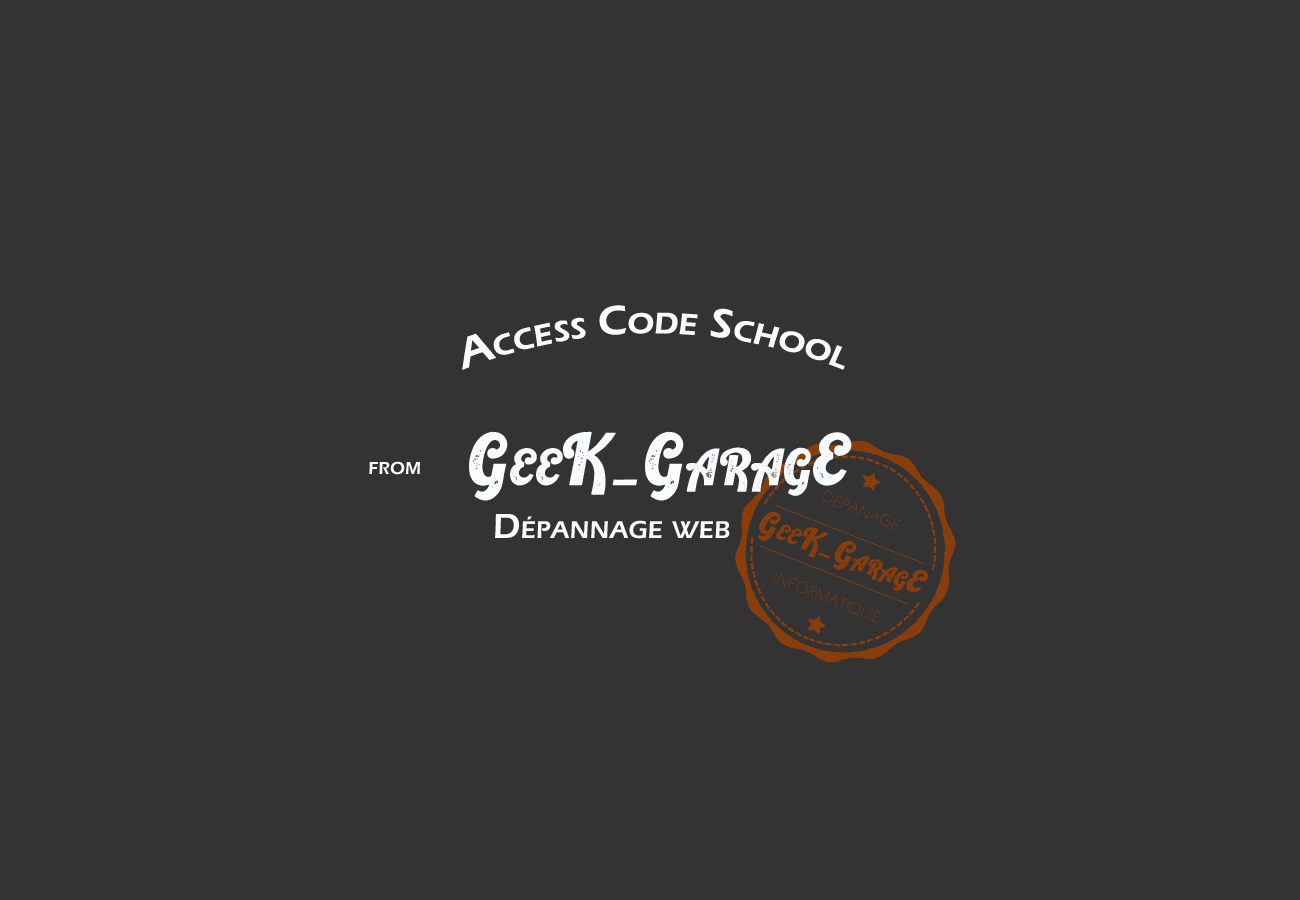
<style>
.page{position:relative;width:1300px;height:900px;background:#333333}
.page>*{position:absolute;margin:0}
.t1{font:43.6px "ErasITC-Demi";color:#f8fcff;font-variant:small-caps}
.t2{font:72px "RetrokingRegular";color:#f8fcff;font-variant:small-caps}
.t3{font:18px "ErasITC-Demi";color:#f8fcff;font-variant:small-caps}
.t4{font:16.6px "ErasITC-Light";font-variant:small-caps}
.t5{font:36px "ErasITC-Demi";color:#f8fcff;font-variant:small-caps}
.t6{font:33.2px "RetrokingRegular";color:#893d0a;font-variant:small-caps}
</style>
<div class="page">
<p class="t1" style="left:462px;top:305px;width:383px;height:65px">Access Code School</p>
<p class="t2" style="left:469px;top:431px;width:383px;height:70px">GeeK_GaragE</p>
<p class="t3" style="left:369px;top:461px;width:51px;height:14px">FROM</p>
<p class="t4" style="left:821px;top:490px;width:80px;height:41px;rotate:21deg">DEPANAGE</p>
<p class="t5" style="left:495px;top:514px;width:235px;height:25px">Dépannage web</p>
<p class="t6" style="left:757px;top:511px;width:171px;height:82px;rotate:21deg">GeeK_GaragE</p>
<p class="t4" style="left:773px;top:571px;width:109px;height:52px;rotate:21deg">INFORMATIQUE</p>
</div>
